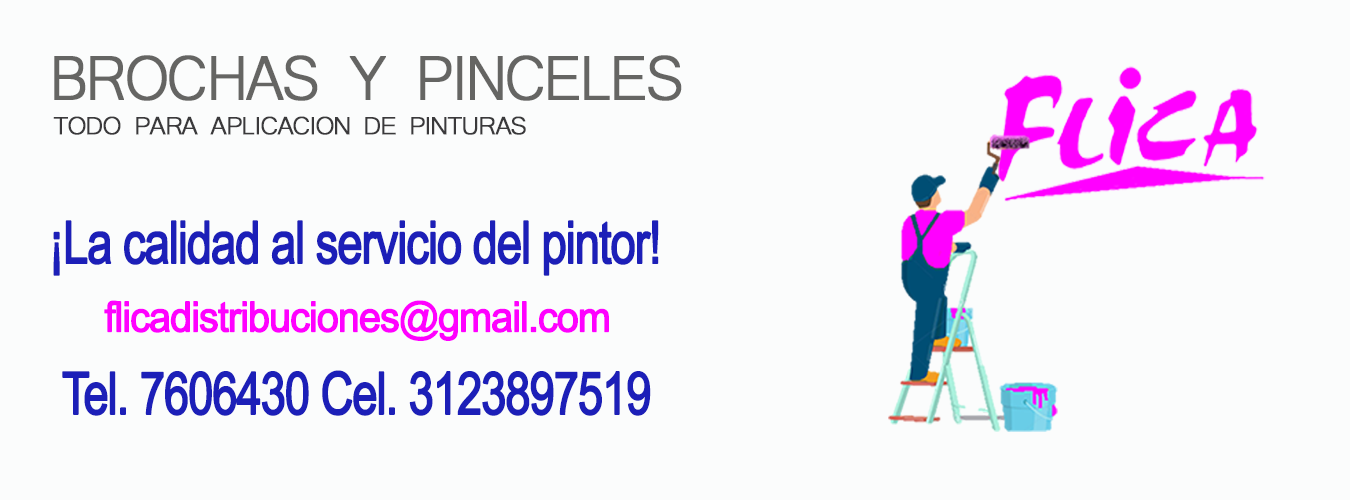
<style>
.page{position:relative;width:1350px;height:500px;background:#fbfcfc}
.page>*{position:absolute;margin:0}
.t1{font:80.1px "Microsoft-Yi-Baiti";letter-spacing:-0.05em;color:#656563;font-weight:bold;scale:0.93 1}
.t2{font:32px "Microsoft-Yi-Baiti";letter-spacing:-0.05em;color:#3a393b;font-weight:bold}
.t3{font:44px "ArialMT";letter-spacing:-0.05em;color:#1c1fb8;font-weight:bold;scale:0.77 1}
.t4{font:31.3px "ArialMT";letter-spacing:-0.05em;color:#ff00ff;font-weight:bold;scale:0.95 1}
</style>
<div class="page">
<p class="t1" style="left:54px;top:55px;width:628px;height:46px">BROCHAS Y PINCELES</p>
<p class="t2" style="left:53px;top:116px;width:473px;height:19px">TODO PARA APLICACION DE PINTURAS</p>
<p class="t3" style="left:53px;top:220px;width:606px;height:56px">¡La calidad al servicio del pintor!</p>
<p class="t4" style="left:104px;top:300px;width:505px;height:41px">flicadistribuciones@gmail.com</p>
<p class="t3" style="left:62px;top:370px;width:589px;height:46px">Tel. 7606430 Cel. 3123897519</p>
</div>
